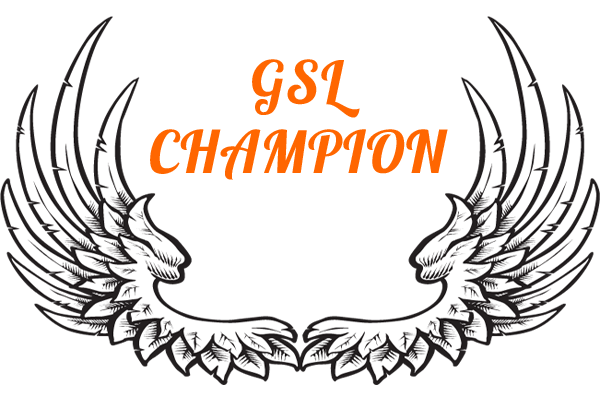
<style>
.page{position:relative;width:600px;height:400px;background:#ffffff}
.page>*{position:absolute;margin:0}
.t1{font:58.3px "Lobster";letter-spacing:0.025em;color:#ff6600}
</style>
<div class="page">
<p class="t1" style="left:150px;top:59px;width:298px;height:121px;text-align:center">GSL<br>CHAMPION</p>
</div>
